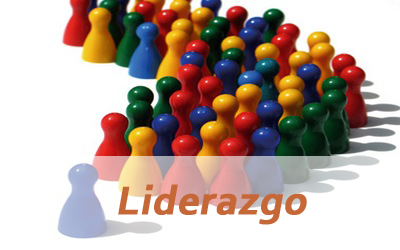
<style>
.page{position:relative;width:400px;height:250px;background:#ffffff}
.page>*{position:absolute;margin:0}
.t1{font:41.7px "Corbel-Bold";letter-spacing:0.005em;color:#c66738;font-weight:bold;font-style:italic}
</style>
<div class="page">
<p class="t1" style="left:118px;top:184px;width:189px;height:41px">Liderazgo</p>
</div>
